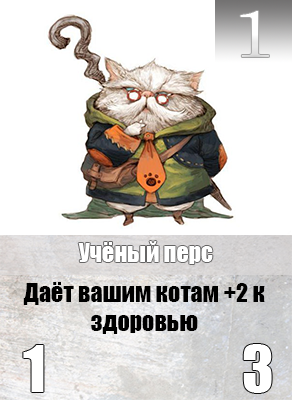
<style>
.page{position:relative;width:292px;height:400px;background:#ffffff}
.page>*{position:absolute;margin:0}
.t1{font:65.6px "Century";color:#ffffff;scale:1.18 1}
.t2{font:24px "Impact";color:#ffffff}
.t3{font:24px "Impact";color:#000000}
</style>
<div class="page">
<p class="t1" style="left:240px;top:11px;width:29px;height:46px">1</p>
<p class="t2" style="left:78px;top:241px;width:135px;height:23px">Учёный перс</p>
<p class="t3" style="left:23px;top:282px;width:242px;height:52px;text-align:center">Даёт вашим котам +2 к здоровью</p>
</div>
